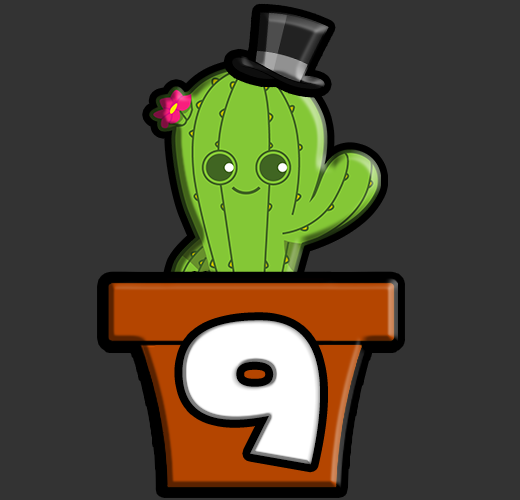
<style>
.page{position:relative;width:520px;height:500px;background:#333333}
.page>*{position:absolute;margin:0}
.t1{font:215.4px "Funhouse";color:#ffffff}
</style>
<div class="page">
<p class="t1" style="left:182px;top:320px;width:138px;height:145px">9</p>
</div>
